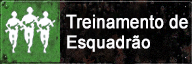
<style>
.page{position:relative;width:192px;height:64px}
.page>*{position:absolute;margin:0}
.t1{font:18.3px "ArialMT";color:#fdfdff;font-weight:bold;scale:0.91 1}
.t2{font:17.6px "ArialMT";color:#fdfdff;font-weight:bold;scale:0.95 1}
</style>
<div class="page">
<p class="t1" style="left:66px;top:14px;width:122px;height:15px">Treinamento de</p>
<p class="t2" style="left:67px;top:35px;width:83px;height:17px">Esquadrão</p>
</div>
